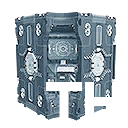
<style>
.page{position:relative;width:128px;height:128px;background:#ffffff}
.page>*{position:absolute;margin:0}
.t1{font:48px "Scorpion";color:#ffffff}
</style>
<div class="page">
<p class="t1" style="left:46px;top:82px;width:75px;height:39px">TH</p>
</div>
